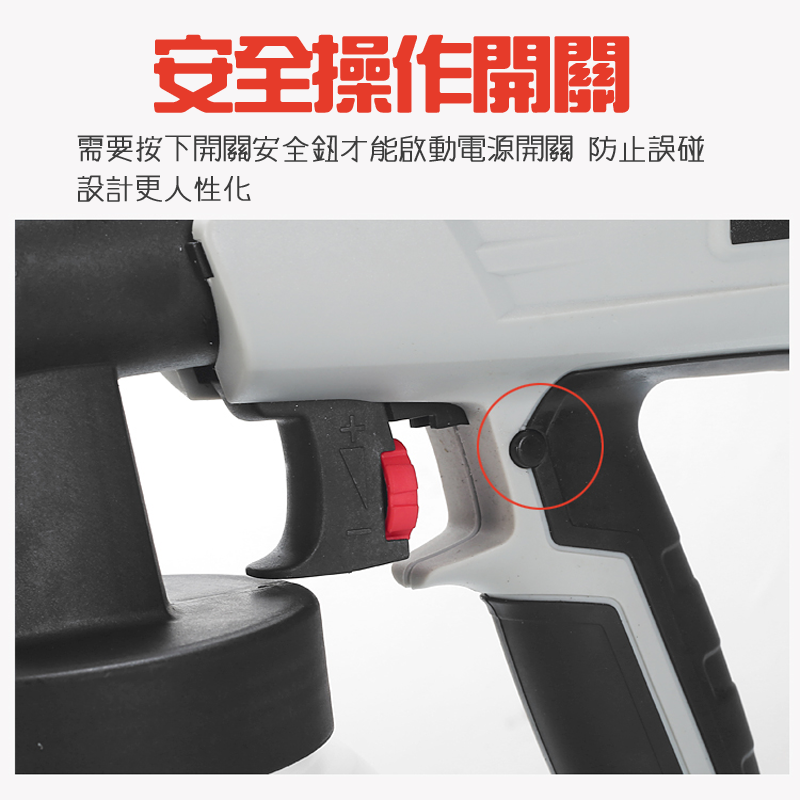
<style>
.page{position:relative;width:800px;height:800px;background:#f8f6f7}
.page>*{position:absolute;margin:0}
.t1{font:81.6px "HanWangZonYi";letter-spacing:-0.05em;color:#e63b2a;font-weight:bold}
.t2{font:30px/40px "winman-tun33014";letter-spacing:-0.05em;color:#3b3b3b;font-weight:bold}
</style>
<div class="page">
<p class="t1" style="left:154px;top:34px;width:476px;height:79px">安全操作開關</p>
<p class="t2" style="left:77px;top:135px;width:627px;height:67px">需要按下開關安全鈕才能啟動電源開關 防止誤碰<br>設計更人性化</p>
</div>
